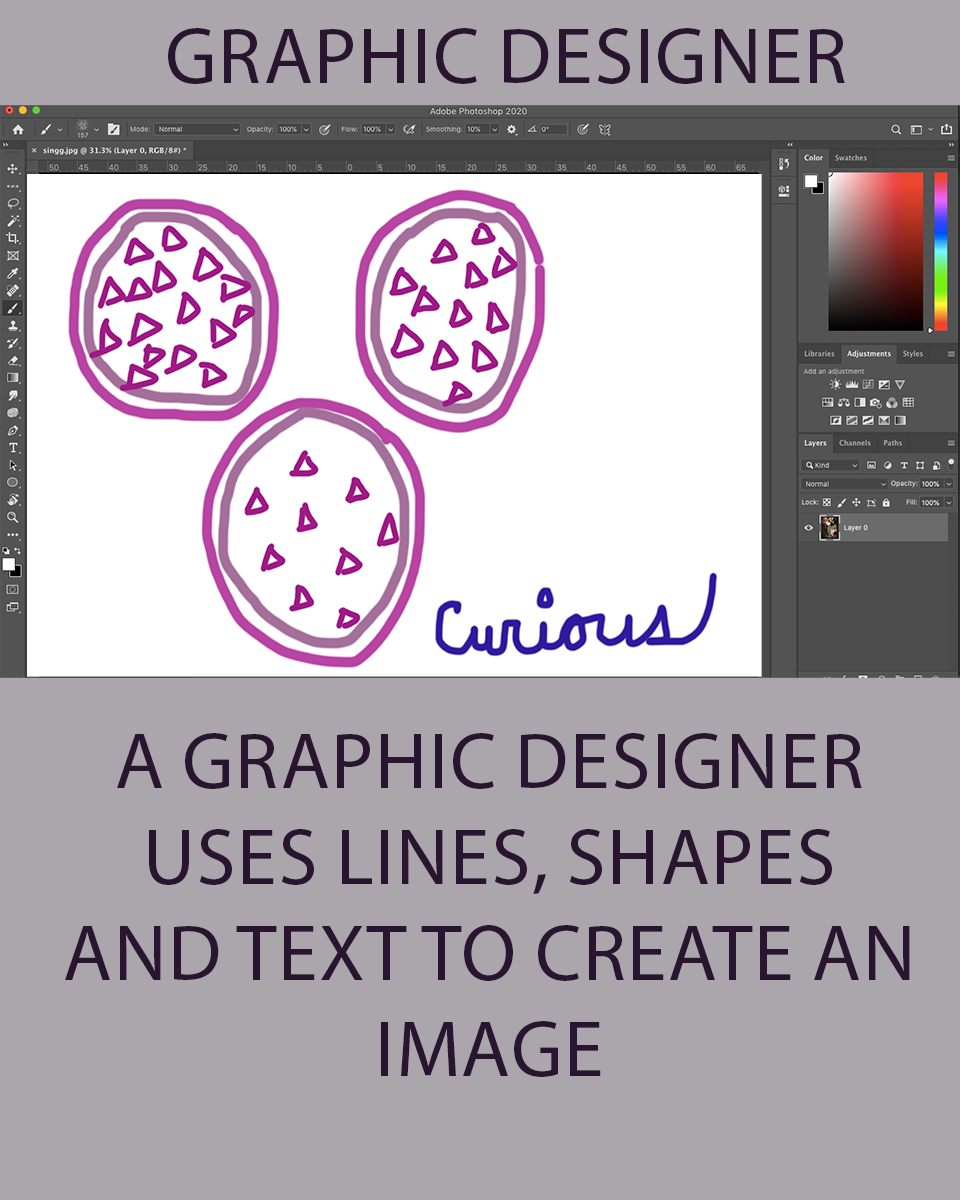
<style>
.page{position:relative;width:960px;height:1200px;background:#aaa6ab}
.page>*{position:absolute;margin:0}
.t1{font:80px "MyriadPro-Regular";color:#2a1531;text-transform:uppercase}
</style>
<div class="page">
<p class="t1" style="left:168px;top:28px;width:677px;height:56px">Graphic designer</p>
<p class="t1" style="left:65px;top:733px;width:845px;height:344px;text-align:center">A graphic designer uses lines, shapes and text to create an image</p>
</div>
